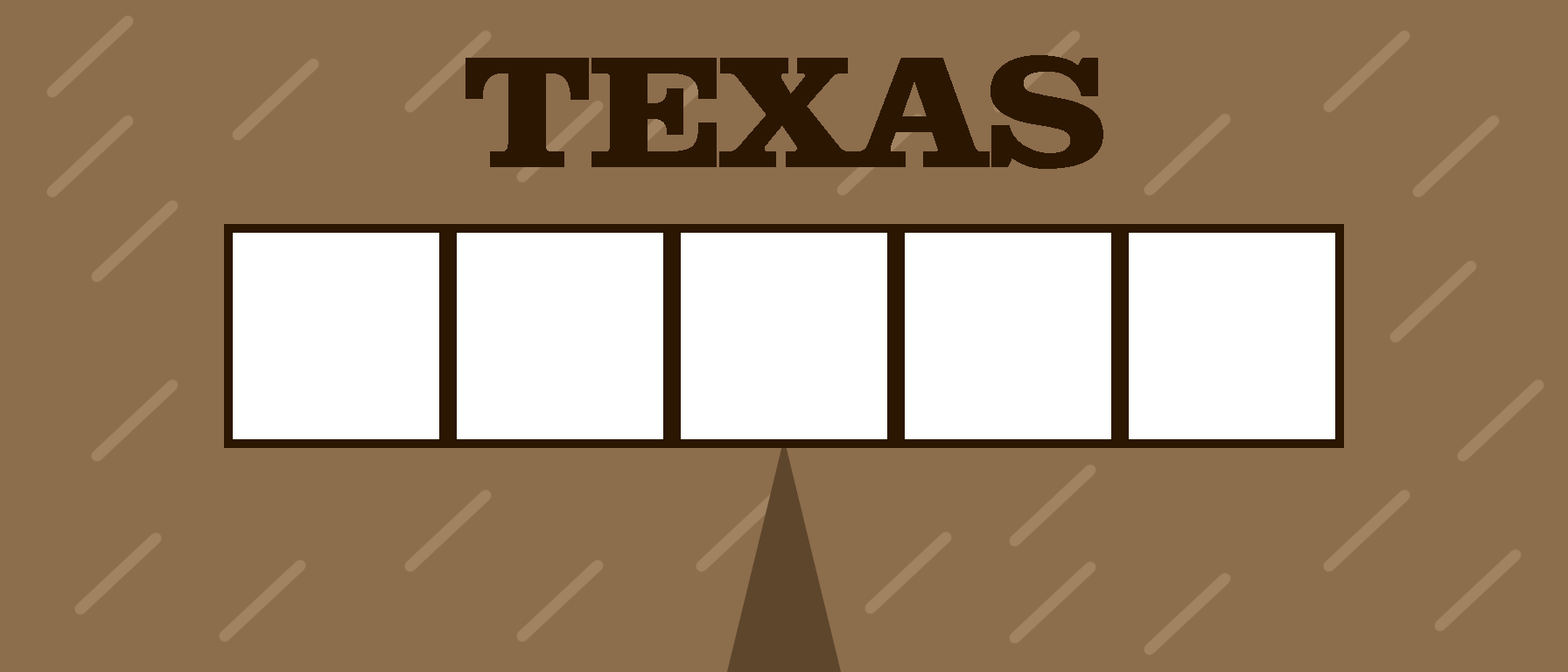
<style>
.page{position:relative;width:1568px;height:672px;background:#8c6d4c}
.page>*{position:absolute;margin:0}
.t1{font:151.4px "Clarendon";color:#2b1602}
</style>
<div class="page">
<p class="t1" style="left:466px;top:55px;width:637px;height:114px">TEXAS</p>
</div>
